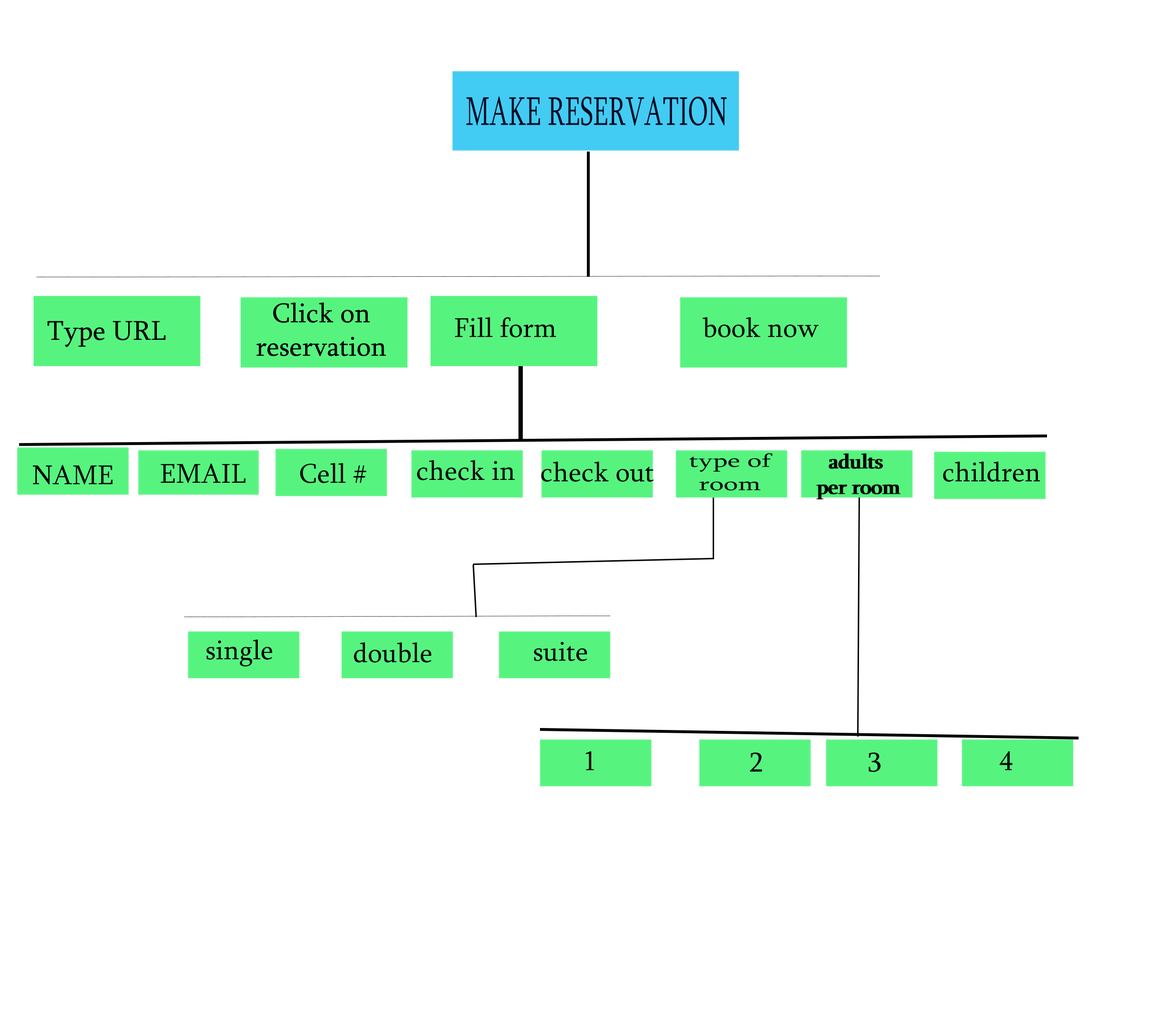
<style>
.page{position:relative;width:1168px;height:1021px;background:#ffffff}
.page>*{position:absolute;margin:0}
.t1{font:30.2px "Sylfaen";color:#030826;scale:0.64 1}
.t2{font:27.9px "Sylfaen";color:#000000}
.t3{font:19.4px "Sylfaen";color:#000000;scale:1.44 1}
.t4{font:21.3px "Sylfaen";color:#000000}
</style>
<div class="page">
<p class="t1" style="left:466px;top:97px;width:261px;height:29px">MAKE RESERVATION</p>
<p class="t2" style="left:256px;top:303px;width:130px;height:53px;text-align:center">Click on<br>reservation</p>
<p class="t2" style="left:256px;top:303px;width:130px;height:53px;text-align:center">Click on<br>reservation</p>
<p class="t2" style="left:455px;top:317px;width:101px;height:21px">Fill form</p>
<p class="t2" style="left:702px;top:317px;width:117px;height:21px">book now</p>
<p class="t2" style="left:47px;top:321px;width:118px;height:26px">Type URL</p>
<p class="t2" style="left:47px;top:321px;width:118px;height:26px">Type URL</p>
<p class="t2" style="left:417px;top:460px;width:97px;height:21px">check in</p>
<p class="t2" style="left:541px;top:461px;width:113px;height:21px">check out</p>
<p class="t3" style="left:689px;top:453px;width:83px;height:38px;text-align:center">type of<br>room</p>
<p class="t4" style="left:816px;top:453px;width:83px;height:47px;text-align:center">adults <br>per room</p>
<p class="t4" style="left:818px;top:453px;width:82px;height:47px;text-align:center">adults <br>per room</p>
<p class="t2" style="left:942px;top:461px;width:98px;height:21px">children</p>
<p class="t2" style="left:33px;top:465px;width:80px;height:20px">NAME</p>
<p class="t2" style="left:161px;top:463px;width:85px;height:20px">EMAIL</p>
<p class="t2" style="left:300px;top:463px;width:66px;height:20px">Cell #</p>
<p class="t2" style="left:206px;top:640px;width:66px;height:27px">single</p>
<p class="t2" style="left:534px;top:642px;width:53px;height:19px">suite</p>
<p class="t2" style="left:354px;top:643px;width:77px;height:20px">double</p>
<p class="t2" style="left:585px;top:751px;width:9px;height:20px">1</p>
<p class="t2" style="left:749px;top:753px;width:13px;height:19px">2</p>
<p class="t2" style="left:868px;top:753px;width:12px;height:19px">3</p>
<p class="t2" style="left:999px;top:751px;width:13px;height:20px">4</p>
</div>
